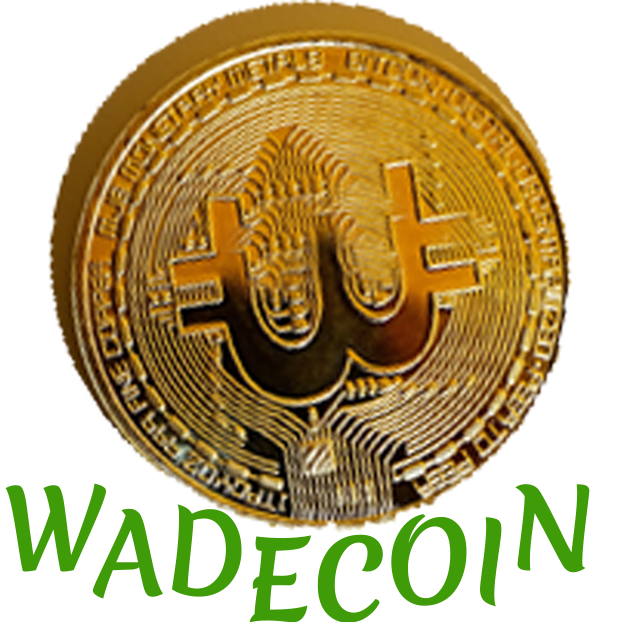
<style>
.page{position:relative;width:622px;height:622px;background:#ffffff}
.page>*{position:absolute;margin:0}
.t1{font:107px "Merienda-Bold";color:#3f9b07}
.t2{font:107px "Merienda-Bold";letter-spacing:-0.12em;color:#3f9b07}
</style>
<div class="page">
<p class="t1" style="left:5px;top:483px;width:585px;height:140px"><span class="t2">W</span>ADECOIN</p>
</div>
